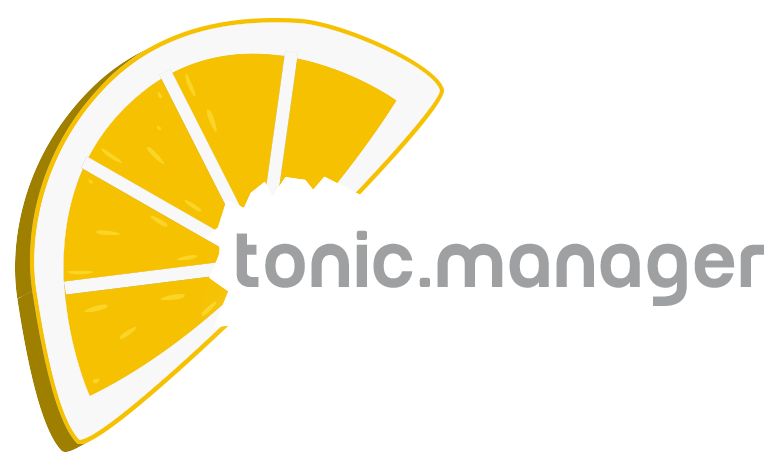
<style>
.page{position:relative;width:782px;height:470px;background:#ffffff}
.page>*{position:absolute;margin:0}
.t1{font:83.3px "Run-Medium";letter-spacing:0.025em;color:#9ea0a2}
</style>
<div class="page">
<p class="t1" style="left:236px;top:230px;width:528px;height:76px">tonic.manager</p>
</div>
